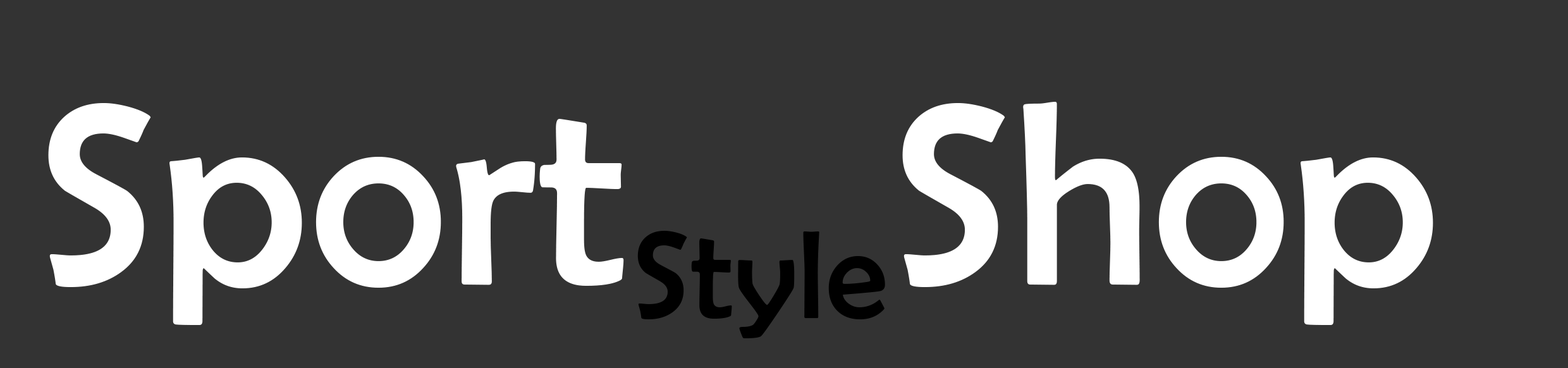
<style>
.page{position:relative;width:1568px;height:368px;background:#333333}
.page>*{position:absolute;margin:0}
.t1{font:263.4px "BerlinSansFB-Reg";letter-spacing:0.01em;color:#ffffff}
.t2{font:126.5px "BerlinSansFB-Reg";letter-spacing:0.01em;color:#000000}
</style>
<div class="page">
<p class="t1" style="left:902px;top:102px;width:531px;height:223px">Shop</p>
<p class="t1" style="left:48px;top:103px;width:576px;height:222px">Sport</p>
<p class="t2" style="left:637px;top:231px;width:248px;height:107px">Style</p>
</div>
